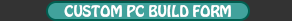
<style>
.page{position:relative;width:292px;height:21px;background:#333333}
.page>*{position:absolute;margin:0}
.t1{font:14px "HoboStd";color:#ffffff;text-transform:uppercase}
</style>
<div class="page">
<p class="t1" style="left:64px;top:5px;width:167px;height:12px">Custom PC Build Form</p>
</div>
